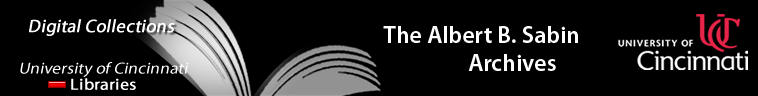
<style>
.page{position:relative;width:758px;height:96px;background:#000000}
.page>*{position:absolute;margin:0}
.t1{font:18px "MyriadPro-Regular";color:#ffffff;font-weight:bold;font-style:italic}
.t2{font:24px "MyriadPro-Semibold";color:#ffffff}
.t3{font:16px/16px "MyriadPro-Regular";color:#ffffff;font-style:italic;scale:1.08 1}
.t4{font:16px/16px "MyriadPro-Regular";color:#ffffff;font-weight:bold;scale:1.08 1}
</style>
<div class="page">
<p class="t1" style="left:29px;top:19px;width:146px;height:17px">Digital Collections</p>
<p class="t2" style="left:383px;top:26px;width:195px;height:45px">The Albert B. Sabin<br>                 Archives</p>
<p class="t3" style="left:20px;top:62px;width:169px;height:28px;text-align:center">University of Cincinnati<span class="t4"> Libraries</span></p>
</div>
